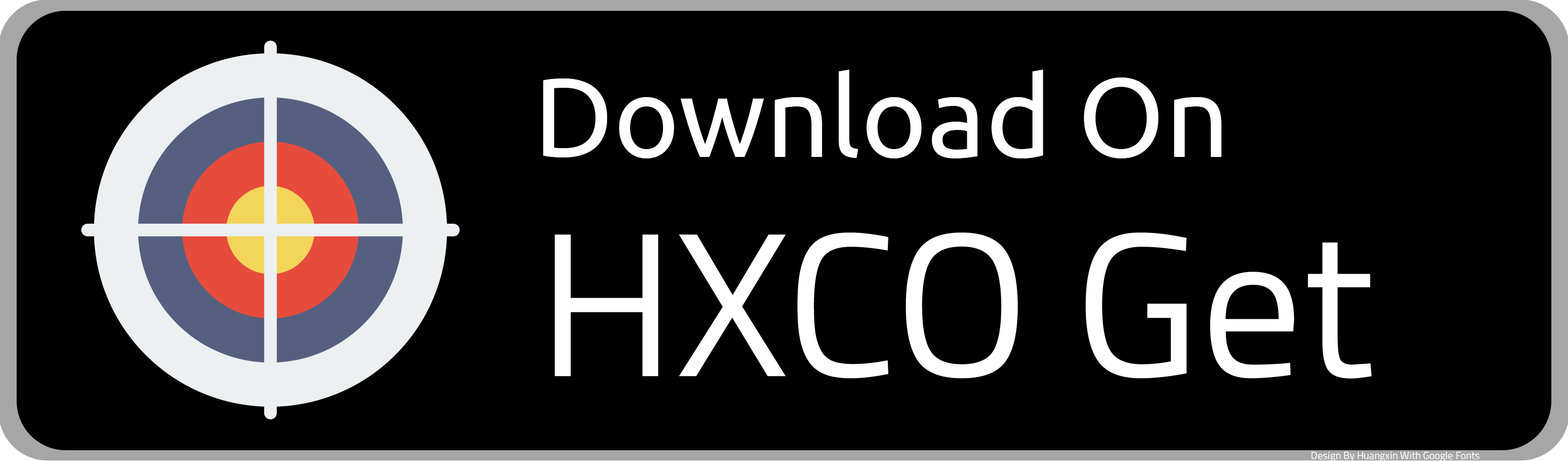
<style>
.page{position:relative;width:1568px;height:461px;background:#000000}
.page>*{position:absolute;margin:0}
.t1{font:112.3px "Ubuntu";color:#ffffff}
.t2{font:204.2px "TitilliumWeb-Regular";color:#ffffff}
.t3{font:10.2px "TitilliumWeb-Regular";color:#ffffff}
</style>
<div class="page">
<p class="t1" style="left:543px;top:70px;width:679px;height:88px">Download On</p>
<p class="t2" style="left:555px;top:232px;width:817px;height:146px">HXCO Get</p>
<p class="t3" style="left:1311px;top:451px;width:168px;height:10px">Design By Huangxin With Google Fonts</p>
</div>
